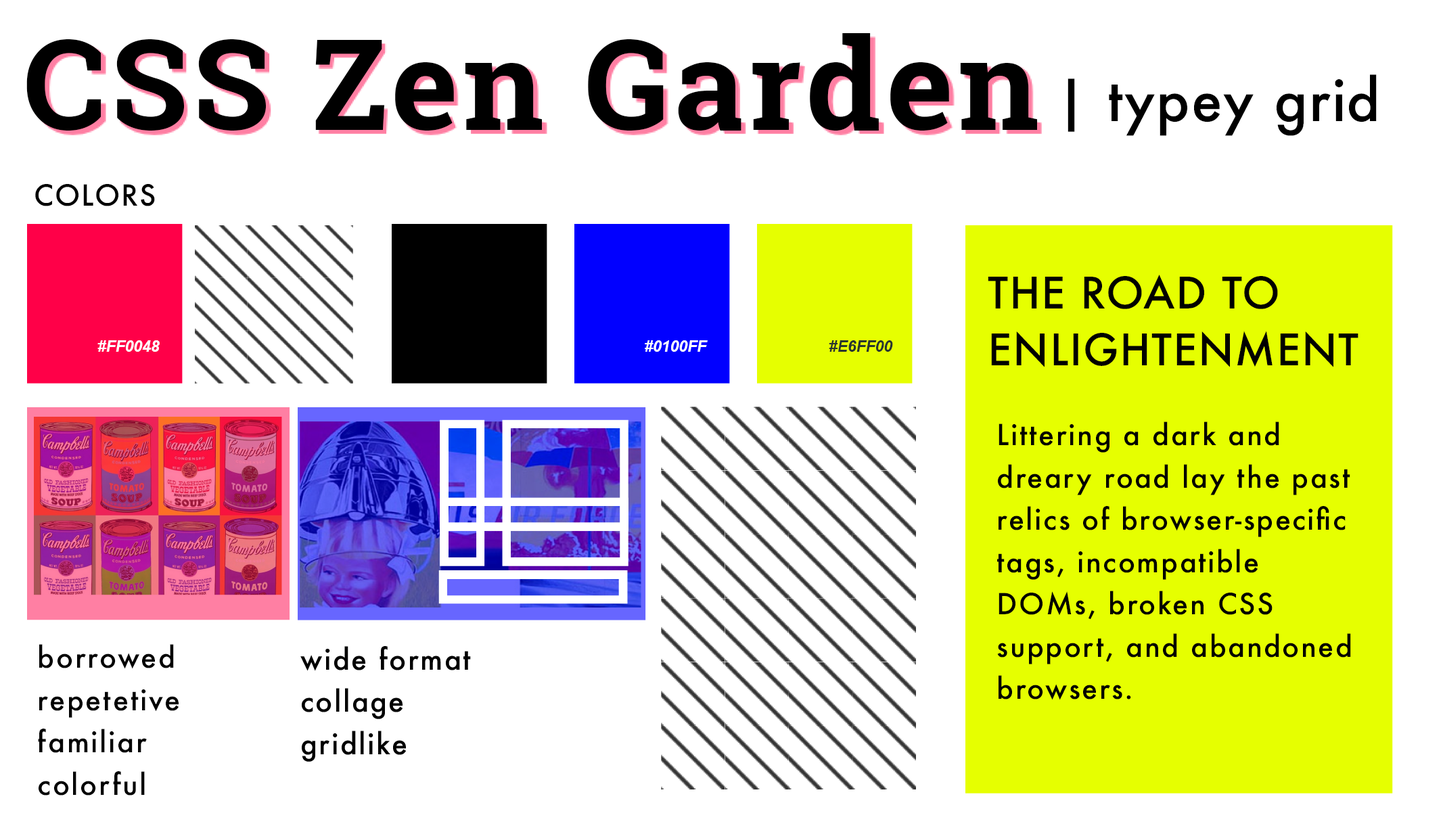
<style>
.page{position:relative;width:1443px;height:826px;background:#ffffff}
.page>*{position:absolute;margin:0}
.t1{font:126.9px "RobotoSlab-Bold";letter-spacing:0.04em;color:#000000}
.t2{font:126.9px "RobotoSlab-Bold";letter-spacing:0.039em;color:#000000}
.t3{font:126.9px "RobotoSlab-Bold";letter-spacing:0.029em;color:#000000}
.t4{font:126.9px "RobotoSlab-Bold";letter-spacing:0.031em;color:#000000}
.t5{font:126.9px "RobotoSlab-Bold";color:#000000}
.t6{font:56.4px "Futura-Medium";letter-spacing:0.024em;color:#000000}
.t7{font:56.4px "Futura-Medium";letter-spacing:0.008em;color:#000000}
.t8{font:56.4px "Futura-Medium";letter-spacing:0.04em;color:#000000}
.t9{font:56.4px "Futura-Medium";color:#000000}
.t10{font:28.2px "Futura-Medium";letter-spacing:0.045em;color:#000000}
.t11{font:28.2px "Futura-Medium";letter-spacing:0.05em;color:#000000}
.t12{font:28.2px "Futura-Medium";letter-spacing:0.019em;color:#000000}
.t13{font:28.2px "Futura-Medium";letter-spacing:0.049em;color:#000000}
.t14{font:28.2px "Futura-Medium";color:#000000}
.t15{font:42.3px "Futura-Medium";letter-spacing:0.024em;color:#000000}
.t16{font:42.3px "Futura-Medium";letter-spacing:0.025em;color:#000000}
.t17{font:42.3px "Futura-Medium";letter-spacing:0.008em;color:#000000}
.t18{font:42.3px "Futura-Medium";letter-spacing:-0.013em;color:#000000}
.t19{font:42.3px "Futura-Medium";color:#000000}
.t20{font:15.5px "Arial-BoldItalicMT";color:#ffffff}
.t21{font:15.5px "Arial-BoldItalicMT";color:#29362f}
.t22{font:28.2px "Futura-Medium";letter-spacing:0.059em;color:#000000}
.t23{font:28.2px "Futura-Medium";letter-spacing:0.06em;color:#000000}
.t24{font:28.2px "Futura-Medium";letter-spacing:0.068em;color:#000000}
.t25{font:28.2px "Futura-Medium";letter-spacing:0.075em;color:#000000}
.t26{font:28.2px "Futura-Medium";letter-spacing:0.053em;color:#000000}
.t27{font:28.2px "Futura-Medium";letter-spacing:0.103em;color:#000000}
.t28{font:28.2px "Futura-Medium";letter-spacing:0.051em;color:#000000}
.t29{font:28.2px "Futura-Medium";letter-spacing:0.08em;color:#000000}
.t30{font:28.2px "Futura-Medium";letter-spacing:0.041em;color:#000000}
.t31{font:28.2px "Futura-Medium";letter-spacing:0.072em;color:#000000}
.t32{font:28.2px "Futura-Medium";letter-spacing:0.044em;color:#000000}
.t33{font:28.2px "Futura-Medium";letter-spacing:0.095em;color:#000000}
.t34{font:28.2px "Futura-Medium";letter-spacing:0.063em;color:#000000}
.t35{font:28.2px "Futura-Medium";letter-spacing:0.078em;color:#000000}
.t36{font:28.2px "Futura-Medium";letter-spacing:0.054em;color:#000000}
.t37{font:28.2px "Futura-Medium";letter-spacing:0.043em;color:#000000}
.t38{font:28.2px "Futura-Medium";letter-spacing:0.047em;color:#000000}
.t39{font:28.2px "Futura-Medium";letter-spacing:0.074em;color:#000000}
.t40{font:28.2px "Futura-Medium";letter-spacing:0.04em;color:#000000}
.t41{font:28.2px "Futura-Medium";letter-spacing:0.056em;color:#000000}
.t42{font:28.2px "Futura-Medium";letter-spacing:0.062em;color:#000000}
.t43{font:28.2px "Futura-Medium";letter-spacing:0.071em;color:#000000}
.t44{font:28.2px "Futura-Medium";letter-spacing:0.096em;color:#000000}
</style>
<div class="page">
<p class="t1" style="left:26px;top:33px;width:1011px;height:98px"><span class="t2">C</span>SS <span class="t3">Z</span>en G<span class="t2">a</span><span class="t4">r</span>de<span class="t5">n</span></p>
<p class="t6" style="left:1068px;top:74px;width:309px;height:62px">| typ<span class="t7">e</span>y g<span class="t8">r</span><span class="t9">id</span></p>
<p class="t10" style="left:35px;top:184px;width:120px;height:22px">C<span class="t11">O</span><span class="t12">L</span><span class="t11">O</span><span class="t13">R</span><span class="t14">S</span></p>
<p class="t15" style="left:988px;top:275px;width:290px;height:34px">T<span class="t16">H</span>E <span class="t17">R</span><span class="t18">O</span>A<span class="t16">D </span><span class="t19">T</span>O</p>
<p class="t20" style="left:97px;top:340px;width:63px;height:12px">#FF0048</p>
<p class="t20" style="left:645px;top:340px;width:63px;height:12px">#0100FF</p>
<p class="t21" style="left:829px;top:340px;width:64px;height:12px">#E6FF00</p>
<p class="t16" style="left:991px;top:331px;width:368px;height:36px"><span class="t15">E</span>NL<span class="t15">I</span>GH<span class="t15">TE</span>N<span class="t15">ME</span>N<span class="t19">T</span></p>
<p class="t22" style="left:999px;top:422px;width:281px;height:31px"><span class="t23">Li</span>t<span class="t24">t</span><span class="t23">e</span><span class="t25">r</span><span class="t23">in</span>g a da<span class="t25">r</span><span class="t23">k</span> a<span class="t23">n</span>d</p>
<p class="t22" style="left:998px;top:464px;width:353px;height:31px">d<span class="t26">r</span><span class="t23">e</span>a<span class="t27">r</span><span class="t23">y </span><span class="t28">r</span><span class="t23">o</span>ad l<span class="t24">a</span><span class="t23">y </span><span class="t29">t</span><span class="t23">he </span>pas<span class="t23">t</span></p>
<p class="t23" style="left:999px;top:506px;width:347px;height:31px"><span class="t26">r</span><span class="t22">e</span>li<span class="t22">c</span>s of<span class="t22"> b</span><span class="t28">r</span><span class="t30">o</span>ws<span class="t22">e</span><span class="t13">r</span>-s<span class="t22">pec</span>iﬁ<span class="t22">c</span></p>
<p class="t22" style="left:997px;top:549px;width:261px;height:31px"><span class="t24">t</span>ag<span class="t23">s</span>, <span class="t23">i</span>nc<span class="t23">o</span><span class="t31">m</span>pat<span class="t23">i</span>b<span class="t23">l</span>e</p>
<p class="t22" style="left:999px;top:591px;width:274px;height:29px"><span class="t23">D</span>OM<span class="t23">s</span>, b<span class="t28">r</span><span class="t23">o</span><span class="t32">k</span>en <span class="t23">CSS</span></p>
<p class="t23" style="left:997px;top:633px;width:354px;height:31px">s<span class="t22">u</span>pp<span class="t22">o</span><span class="t33">r</span>t, and aband<span class="t22">o</span>n<span class="t22">e</span>d</p>
<p class="t34" style="left:39px;top:644px;width:135px;height:25px">bo<span class="t35">r</span><span class="t36">r</span><span class="t37">o</span><span class="t38">w</span>e<span class="t14">d</span></p>
<p class="t22" style="left:300px;top:646px;width:171px;height:25px">wi<span class="t23">d</span>e <span class="t31">f</span>o<span class="t39">r</span>m<span class="t23">a</span><span class="t14">t</span></p>
<p class="t22" style="left:999px;top:675px;width:132px;height:25px">b<span class="t28">r</span><span class="t40">o</span>ws<span class="t23">e</span>rs<span class="t14">.</span></p>
<p class="t41" style="left:39px;top:690px;width:140px;height:28px">r<span class="t34">e</span><span class="t42">p</span><span class="t31">e</span><span class="t43">t</span><span class="t31">e</span><span class="t42">t</span><span class="t34">i</span><span class="t10">v</span><span class="t14">e</span></p>
<p class="t22" style="left:302px;top:688px;width:101px;height:31px"><span class="t23">co</span>llag<span class="t14">e</span></p>
<p class="t34" style="left:38px;top:729px;width:109px;height:24px"><span class="t35">f</span>amilia<span class="t14">r</span></p>
<p class="t22" style="left:302px;top:731px;width:104px;height:31px">g<span class="t25">r</span>idli<span class="t37">k</span><span class="t14">e</span></p>
<p class="t34" style="left:39px;top:771px;width:106px;height:25px">co<span class="t42">l</span>o<span class="t44">r</span><span class="t42">fu</span><span class="t14">l</span></p>
</div>
